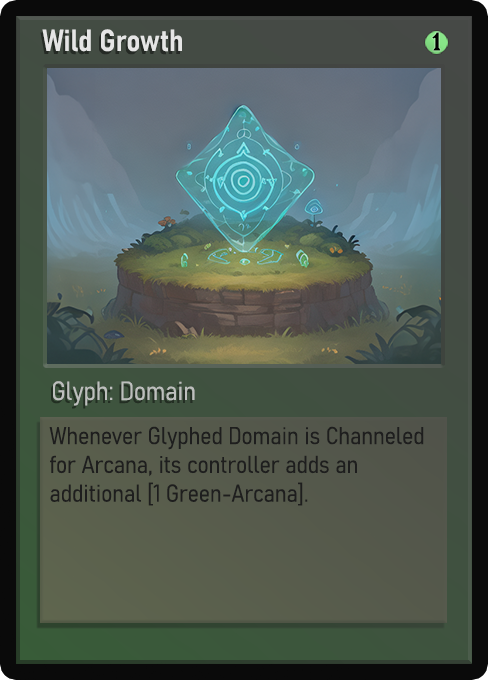
<style>
.page{position:relative;width:488px;height:680px}
.page>*{position:absolute;margin:0}
.t1{font:30px "Bahnschrift-SemiBoldSemiCondensed";color:#f2f2f2;font-weight:bold}
.t2{font:25px "WTRRoycroft";color:#000000;font-weight:bold;scale:1.09 1}
.t3{font:26px "Bahnschrift-LightSemiCondensed";color:#c8c8c8;font-weight:bold}
.t4{font:24px "Bahnschrift-LightSemiCondensed";color:#1e1e1e;font-weight:bold}
</style>
<div class="page">
<p class="t1" style="left:42px;top:29px;width:140px;height:23px;opacity:0.9">Wild Growth</p>
<p class="t2" style="left:432px;top:32px;width:9px;height:19px">1</p>
<p class="t3" style="left:53px;top:381px;width:142px;height:25px;opacity:0.9">Glyph: Domain</p>
<p class="t4" style="left:49px;top:426px;width:375px;height:80px">Whenever Glyphed Domain is Channeled for Arcana, its controller adds an additional [1 Green-Arcana].</p>
</div>
